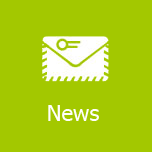
<style>
.page{position:relative;width:152px;height:152px;background:#a3c800}
.page>*{position:absolute;margin:0}
.t1{font:22px "Tahoma";color:#fffffd}
</style>
<div class="page">
<p class="t1" style="left:48px;top:105px;width:51px;height:16px">News</p>
</div>
